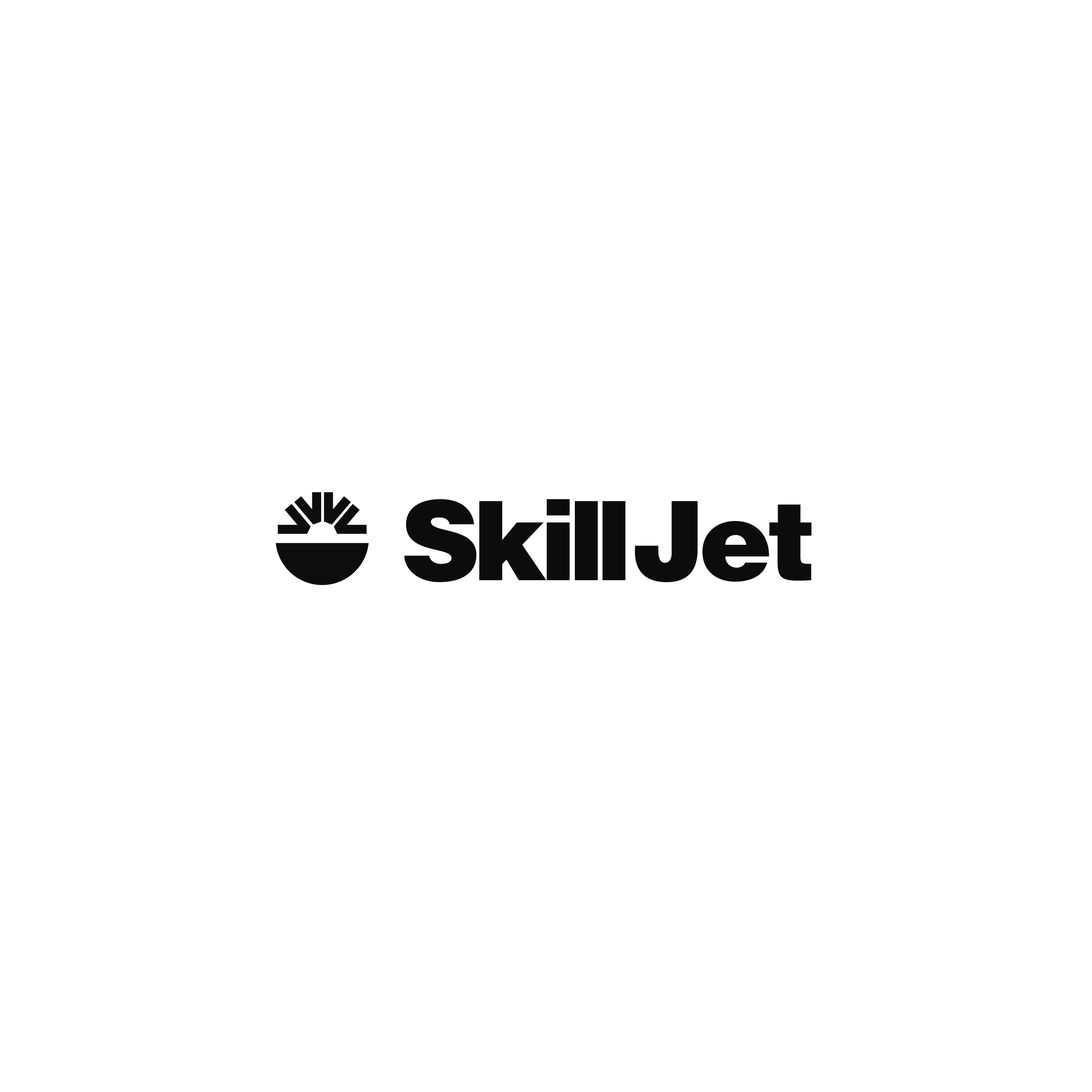
<style>
.page{position:relative;width:1092px;height:1092px;background:#ffffff}
.page>*{position:absolute;margin:0}
.t1{font:109.9px "Helvetica-Black";color:#0d0d0d}
</style>
<div class="page">
<p class="t1" style="left:404px;top:499px;width:408px;height:84px">SkillJet</p>
</div>
